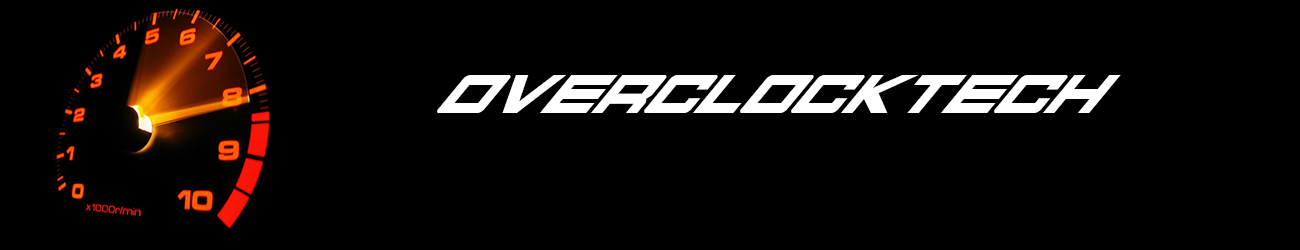
<style>
.page{position:relative;width:1300px;height:250px;background:#000000}
.page>*{position:absolute;margin:0}
.t1{font:77.9px "Montroc";color:#ffffff;scale:0.77 1}
</style>
<div class="page">
<p class="t1" style="left:437px;top:75px;width:684px;height:38px">overclocktech</p>
</div>
